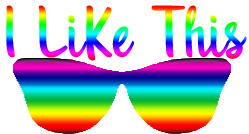
<style>
.page{position:relative;width:249px;height:134px;background:#ffffff}
.page>*{position:absolute;margin:0}
.t1{font:74.2px "Unquestionify";scale:0.93 1}
</style>
<div class="page">
<p class="t1" style="left:6px;top:5px;width:241px;height:56px">I LiKe This</p>
</div>
